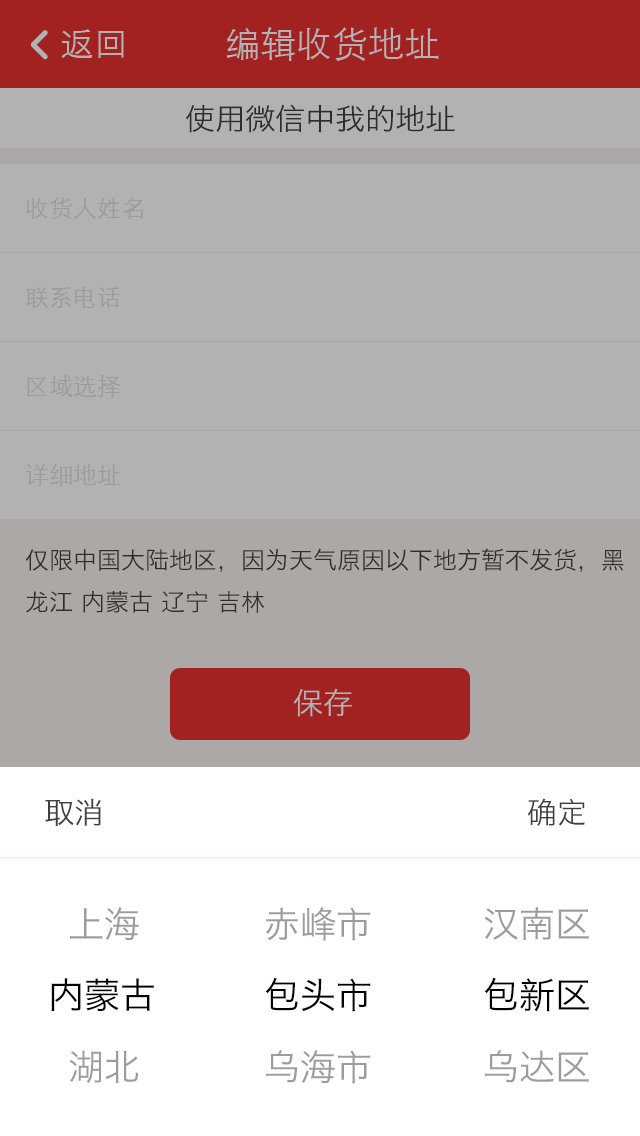
<style>
.page{position:relative;width:640px;height:1136px;background:#b2b2b2}
.page>*{position:absolute;margin:0}
.t1{font:30px "HiraginoSansGB-W3";color:#404040}
.t2{font:24px "HiraginoSansGB-W3";color:#404040}
.t3{font:30px "HiraginoSansGB-W3";color:#b2b2b2}
.t4{font:36px "HiraginoSansGB-W3";color:#9c9c9c}
.t5{font:36px "HiraginoSansGB-W3";color:#000000}
</style>
<div class="page">
<p class="t1" style="left:186px;top:104px;width:269px;height:29px">使用微信中我的地址</p>
<p class="t2" style="left:25px;top:548px;width:599px;height:65px">仅限中国大陆地区，因为天气原因以下地方暂不发货，黑龙江 内蒙古 辽宁 吉林</p>
<p class="t3" style="left:293px;top:688px;width:59px;height:29px">保存</p>
<p class="t1" style="left:45px;top:798px;width:56px;height:28px">取消</p>
<p class="t1" style="left:527px;top:798px;width:58px;height:28px">确定</p>
<p class="t4" style="left:70px;top:907px;width:69px;height:33px">上海</p>
<p class="t4" style="left:265px;top:907px;width:106px;height:34px">赤峰市</p>
<p class="t4" style="left:484px;top:907px;width:105px;height:33px">汉南区</p>
<p class="t5" style="left:265px;top:977px;width:106px;height:35px">包头市</p>
<p class="t5" style="left:484px;top:977px;width:105px;height:35px">包新区</p>
<p class="t5" style="left:51px;top:978px;width:103px;height:33px">内蒙古</p>
<p class="t4" style="left:69px;top:1050px;width:70px;height:34px">湖北</p>
<p class="t4" style="left:266px;top:1050px;width:105px;height:34px">乌海市</p>
<p class="t4" style="left:485px;top:1050px;width:104px;height:33px">乌达区</p>
</div>
